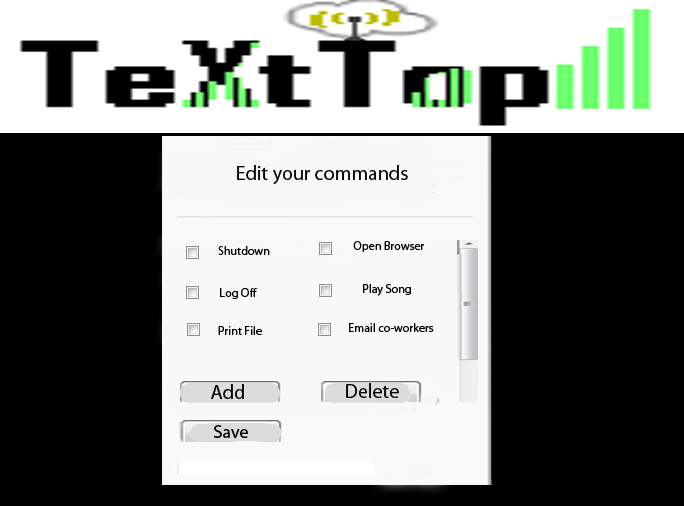
<style>
.page{position:relative;width:684px;height:506px;background:#000000}
.page>*{position:absolute;margin:0}
.t1{font:20px "MyriadPro-Regular";color:#000000}
.t2{font:12px "MyriadPro-Regular";color:#000000}
</style>
<div class="page">
<p class="t1" style="left:237px;top:165px;width:171px;height:19px">Edit your commands</p>
<p class="t2" style="left:218px;top:246px;width:52px;height:9px">Shutdown</p>
<p class="t2" style="left:353px;top:241px;width:71px;height:11px">Open Browser</p>
<p class="t2" style="left:220px;top:288px;width:37px;height:11px">Log Off</p>
<p class="t2" style="left:363px;top:284px;width:48px;height:12px">Play Song</p>
<p class="t2" style="left:218px;top:326px;width:44px;height:9px">Print File</p>
<p class="t2" style="left:349px;top:323px;width:85px;height:9px">Email co-workers</p>
<p class="t1" style="left:211px;top:384px;width:33px;height:15px">Add</p>
<p class="t1" style="left:346px;top:383px;width:53px;height:15px">Delete</p>
</div>
